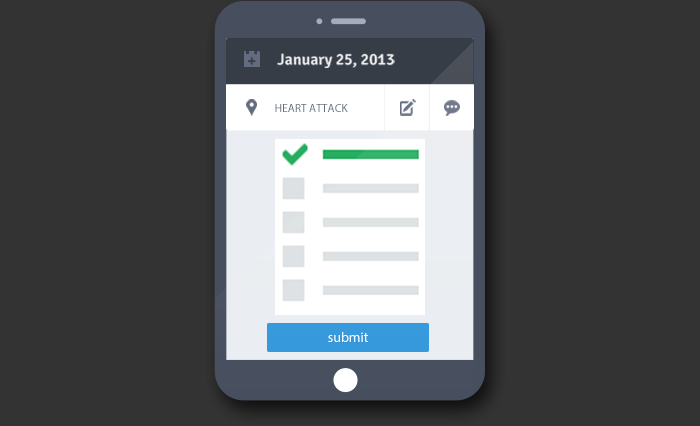
<style>
.page{position:relative;width:700px;height:426px;background:#333333}
.page>*{position:absolute;margin:0}
.t1{font:16px "Signika-Semibold";color:#f1f1f3}
.t2{font:11.5px "MyriadPro-Regular";color:#636d7f;text-transform:uppercase}
.t3{font:13.9px "MyriadPro-Regular";color:#ffffff}
</style>
<div class="page">
<p class="t1" style="left:277px;top:53px;width:118px;height:15px">January 25, 2013</p>
<p class="t2" style="left:275px;top:104px;width:73px;height:8px">Heart Attack</p>
<p class="t3" style="left:328px;top:332px;width:40px;height:10px">submit</p>
</div>
